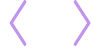
<style>
.page{position:relative;width:100px;height:50px;background:#ffffff}
.page>*{position:absolute;margin:0}
.t1{font:64px "SimSun";color:#c093ec;font-weight:bold;scale:0.66 1}
</style>
<div class="page">
<p class="t1" style="left:9px;top:0px;width:18px;height:46px">&lt;</p>
<p class="t1" style="left:73px;top:0px;width:18px;height:46px">&gt;</p>
</div>
